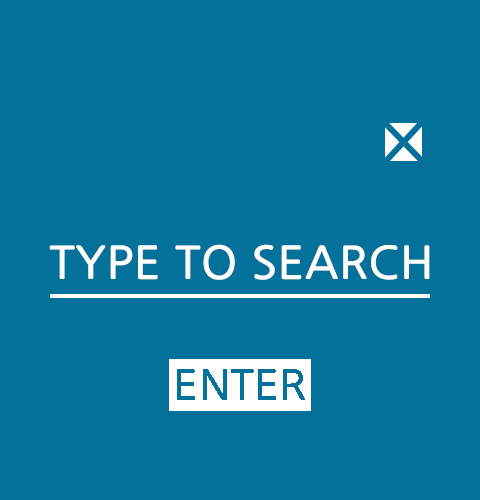
<style>
.page{position:relative;width:480px;height:500px;background:#04719a}
.page>*{position:absolute;margin:0}
.t1{font:43.5px "NanumGothic";color:#ffffff;font-weight:bold;scale:1.04 1}
.t2{font:40px "NanumGothic";color:#04719a;text-transform:uppercase;font-weight:bold;scale:1.04 1}
</style>
<div class="page">
<p class="t1" style="left:49px;top:244px;width:381px;height:36px">TYPE TO SEARCH</p>
<p class="t2" style="left:177px;top:369px;width:128px;height:31px">ENTER</p>
</div>
